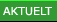
<style>
.page{position:relative;width:57px;height:22px;background:#339933}
.page>*{position:absolute;margin:0}
.t1{font:11px "Verdana";color:#ffffff}
</style>
<div class="page">
<p class="t1" style="left:3px;top:7px;width:49px;height:9px">AKTUELT</p>
</div>
